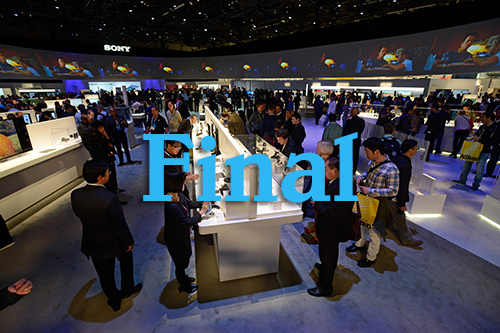
<style>
.page{position:relative;width:500px;height:333px}
.page>*{position:absolute;margin:0}
.t1{font:100px "Belwe-Bold";color:#2fb6f5}
</style>
<div class="page">
<p class="t1" style="left:143px;top:132px;width:215px;height:71px">Final</p>
</div>
